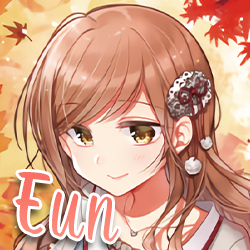
<style>
.page{position:relative;width:250px;height:250px}
.page>*{position:absolute;margin:0}
.t1{font:89.8px "AutumnCallingRegular";letter-spacing:0.04em;color:#fa8072;font-variant:small-caps}
</style>
<div class="page">
<p class="t1" style="left:15px;top:172px;width:104px;height:70px;rotate:6deg">Eun</p>
</div>
